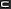
<style>
.page{position:relative;width:11px;height:9px}
.page>*{position:absolute;margin:0}
.t1{font:10px "ThundergodII";color:#ffffff}
</style>
<div class="page">
<p class="t1" style="left:1px;top:1px;width:9px;height:7px">C</p>
</div>
